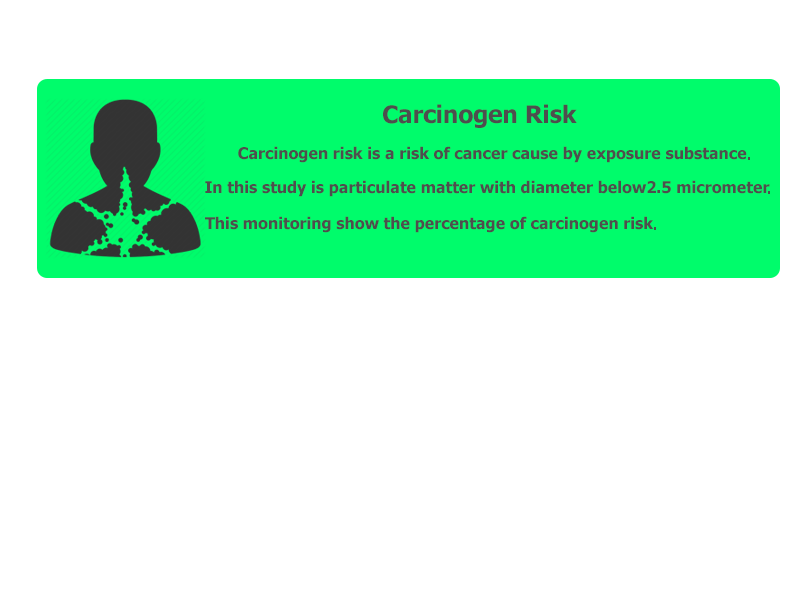
<style>
.page{position:relative;width:800px;height:600px;background:#ffffff}
.page>*{position:absolute;margin:0}
.t1{font:24px "Tahoma-Bold";color:#4d4f4e}
.t2{font:16px "Tahoma-Bold";color:#4d4f4e}
</style>
<div class="page">
<p class="t1" style="left:383px;top:104px;width:194px;height:24px">Carcinogen Risk</p>
<p class="t2" style="left:238px;top:146px;width:509px;height:17px">Carcinogen risk is a risk of cancer cause by exposure substance</p>
<p class="t2" style="left:205px;top:180px;width:565px;height:17px">In this study is particulate matter with diameter below2.5 micrometer</p>
<p class="t2" style="left:205px;top:216px;width:449px;height:17px">This monitoring show the percentage of carcinogen risk</p>
</div>
